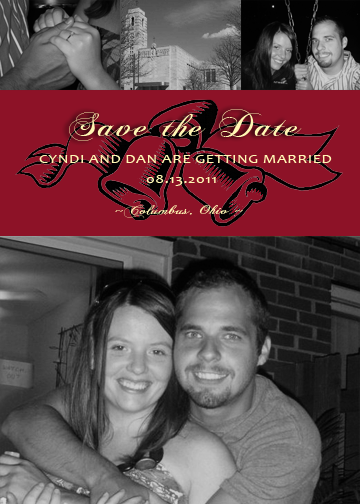
<style>
.page{position:relative;width:360px;height:504px}
.page>*{position:absolute;margin:0}
.t1{font:34px "ChopinScript";letter-spacing:0.025em;color:#fff7b4;scale:1.25 1}
.t2{font:13px "Candara";letter-spacing:0.025em;color:#fff7b4;text-transform:uppercase;scale:1.25 1}
.t3{font:13px "Candara";letter-spacing:0.025em;color:#fff7b4;scale:1.25 1}
.t4{font:14px "ChopinScript";letter-spacing:0.025em;color:#fff7b4;scale:1.25 1}
</style>
<div class="page">
<p class="t1" style="left:69px;top:109px;width:233px;height:32px">Save the Date</p>
<p class="t2" style="left:39px;top:155px;width:293px;height:8px">Cyndi and Dan are getting married</p>
<p class="t3" style="left:146px;top:175px;width:70px;height:11px">08.13.2011</p>
<p class="t4" style="left:115px;top:205px;width:128px;height:14px">~Columbus, Ohio ~</p>
</div>
